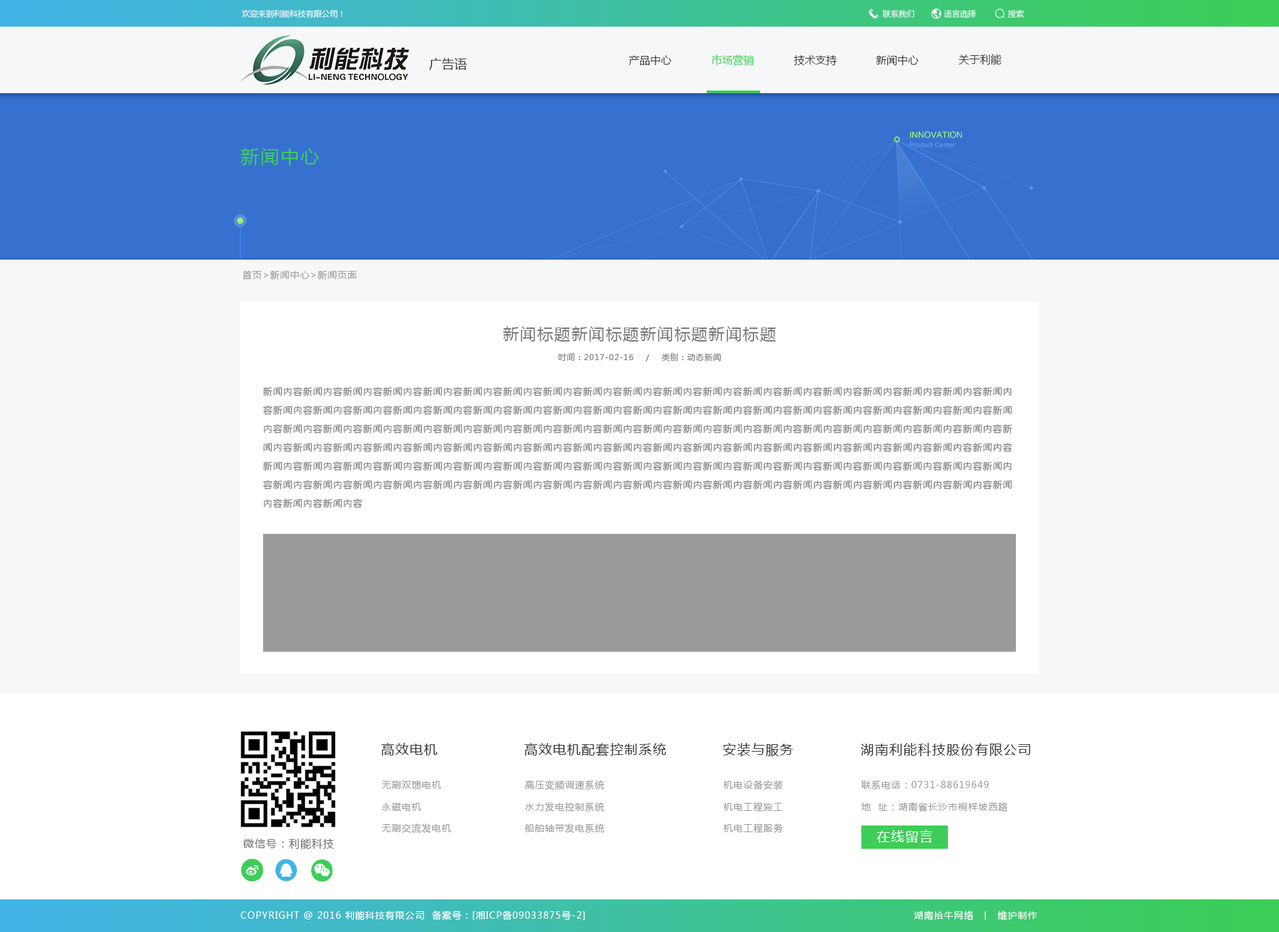
<style>
.page{position:relative;width:1279px;height:932px;background:#ffffff}
.page>*{position:absolute;margin:0}
.t1{font:8px "MicrosoftYaHei";color:#f6f7f9}
.t2{font:10.7px "MicrosoftYaHei";color:#343434}
.t3{font:12.6px "MicrosoftYaHei";color:#343434}
.t4{font:10.7px "MicrosoftYaHei";color:#3dcd58}
.t5{font:18.6px "MicrosoftYaHei";letter-spacing:0.072em;color:#3dcd58}
.t6{font:9.3px "MicrosoftYaHei";letter-spacing:0.072em;color:#9a9a9a}
.t7{font:16px "MicrosoftYaHei";letter-spacing:0.072em;color:#777777}
.t8{font:8px "MicrosoftYaHei";letter-spacing:0.072em;color:#777777}
.t9{font:9.3px/18.6px "MicrosoftYaHei";letter-spacing:0.072em;color:#777777}
.t10{font:13.3px "MicrosoftYaHei";letter-spacing:0.072em;color:#323232}
.t11{font:13.3px "MicrosoftYaHei";letter-spacing:0.072em;color:#ffffff}
.t12{font:10.7px "MicrosoftYaHei";letter-spacing:0.072em;color:#676767}
.t13{font:9.3px "MicrosoftYaHei";letter-spacing:0.072em;color:#ffffff}
</style>
<div class="page">
<p class="t1" style="left:242px;top:9px;width:100px;height:9px">欢迎来到利能科技有限公司！</p>
<p class="t1" style="left:882px;top:10px;width:32px;height:8px">联系我们</p>
<p class="t1" style="left:944px;top:9px;width:32px;height:9px">语言选择</p>
<p class="t1" style="left:1008px;top:9px;width:16px;height:9px">搜索</p>
<p class="t2" style="left:958px;top:54px;width:43px;height:11px">关于利能</p>
<p class="t3" style="left:429px;top:58px;width:38px;height:12px">广告语</p>
<p class="t2" style="left:629px;top:55px;width:42px;height:10px">产品中心</p>
<p class="t4" style="left:711px;top:55px;width:43px;height:11px">市场营销</p>
<p class="t2" style="left:794px;top:55px;width:43px;height:10px">技术支持</p>
<p class="t2" style="left:876px;top:55px;width:42px;height:10px">新闻中心</p>
<p class="t5" style="left:240px;top:148px;width:79px;height:18px">新闻中心</p>
<p class="t6" style="left:242px;top:270px;width:115px;height:10px">首页&gt;新闻中心&gt;新闻页面</p>
<p class="t7" style="left:503px;top:326px;width:273px;height:16px">新闻标题新闻标题新闻标题新闻标题</p>
<p class="t8" style="left:558px;top:353px;width:163px;height:9px">时间：2017-02-16    /    类别：动态新闻</p>
<p class="t9" style="left:263px;top:387px;width:749px;height:121px">新闻内容新闻内容新闻内容新闻内容新闻内容新闻内容新闻内容新闻内容新闻内容新闻内容新闻内容新闻内容新闻内容新闻内容新闻内容新闻内容新闻内容新闻内容新闻内容新闻内容新闻内容新闻内容新闻内容新闻内容新闻内容新闻内容新闻内容新闻内容新闻内容新闻内容新闻内容新闻内容新闻内容新闻内容新闻内容新闻内容新闻内容新闻内容新闻内容新闻内容新闻内容新闻内容新闻内容新闻内容新闻内容新闻内容新闻内容新闻内容新闻内容新闻内容新闻内容新闻内容新闻内容新闻内容新闻内容新闻内容新闻内容新闻内容新闻内容新闻内容新闻内容新闻内容新闻内容新闻内容新闻内容新闻内容新闻内容新闻内容新闻内容新闻内容新闻内容新闻内容新闻内容新闻内容新闻内容新闻内容新闻内容新闻内容新闻内容新闻内容新闻内容新闻内容新闻内容新闻内容新闻内容新闻内容新闻内容新闻内容新闻内容新闻内容新闻内容新闻内容新闻内容新闻内容新闻内容新闻内容新闻内容新闻内容新闻内容新闻内容新闻内容新闻内容新闻内容新闻内容新闻内容新闻内容新闻内容新闻内容新闻内容新闻内容新闻内容新闻内容新闻内容新闻内容新闻内容</p>
<p class="t10" style="left:381px;top:743px;width:57px;height:13px">高效电机</p>
<p class="t10" style="left:524px;top:743px;width:142px;height:14px">高效电机配套控制系统</p>
<p class="t10" style="left:723px;top:743px;width:70px;height:14px">安装与服务</p>
<p class="t10" style="left:861px;top:743px;width:169px;height:14px">湖南利能科技股份有限公司</p>
<p class="t6" style="left:382px;top:781px;width:59px;height:9px">无刷双馈电机</p>
<p class="t6" style="left:525px;top:781px;width:79px;height:10px">高压变频调速系统</p>
<p class="t6" style="left:723px;top:781px;width:60px;height:9px">机电设备安装</p>
<p class="t6" style="left:861px;top:781px;width:127px;height:9px">联系电话：0731-88619649</p>
<p class="t6" style="left:382px;top:803px;width:39px;height:9px">永磁电机</p>
<p class="t6" style="left:525px;top:803px;width:79px;height:9px">水力发电控制系统</p>
<p class="t6" style="left:723px;top:803px;width:60px;height:10px">机电工程施工</p>
<p class="t6" style="left:861px;top:803px;width:147px;height:10px">地  址：湖南省长沙市桐梓坡西路</p>
<p class="t6" style="left:382px;top:824px;width:69px;height:10px">无刷交流发电机</p>
<p class="t6" style="left:525px;top:824px;width:79px;height:9px">船舶轴带发电系统</p>
<p class="t6" style="left:723px;top:824px;width:60px;height:10px">机电工程服务</p>
<p class="t11" style="left:877px;top:830px;width:55px;height:13px">在线留言</p>
<p class="t12" style="left:243px;top:839px;width:91px;height:11px">微信号：利能科技</p>
<p class="t13" style="left:240px;top:911px;width:345px;height:10px">COPYRIGHT @ 2016 利能科技有限公司  备案号：[湘ICP备09033875号-2]</p>
<p class="t13" style="left:914px;top:911px;width:123px;height:10px">湖南拾牛网络  丨  维护制作</p>
</div>
